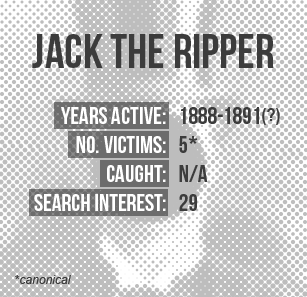
<style>
.page{position:relative;width:307px;height:297px;background:#bdbdbd}
.page>*{position:absolute;margin:0}
.t1{font:48px "BebasNeue";color:#3c3c3c}
.t2{font:24px "BebasNeue";color:#ffffff}
.t3{font:24px/125px "BebasNeue";color:#ffffff}
.t4{font:24px/125px "BebasNeue";color:#3c3c3c}
.t5{font:24px "BebasNeue";color:#3c3c3c}
.t6{font:24px "Arial-BoldMT";color:#3c3c3c}
.t7{font:18px "ArialNarrow-Bold";color:#3c3c3c}
.t8{font:12px "Arial-ItalicMT";color:#3c3c3c}
.t9{font:12px "Arial-BoldMT";color:#3c3c3c}
</style>
<div class="page">
<p class="t1" style="left:32px;top:34px;width:242px;height:34px">JACK THE RIPPER</p>
<p class="t2" style="left:34px;top:107px;width:132px;height:104px;text-align:right"><span class="t3">YEARS ACTIVE:<br></span>No. Victims:<br>cAUGHT:<br>SEARCH INTEREST:</p>
<p class="t4" style="left:179px;top:107px;width:80px;height:104px">1888-1891<br><span class="t5">5</span><span class="t6">*<br></span><span class="t5">N/A<br>29</span></p>
<p class="t7" style="left:262px;top:108px;width:18px;height:17px">(?)</p>
<p class="t8" style="left:15px;top:275px;width:56px;height:9px"><span class="t9">*</span>canonical</p>
</div>
